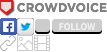
<style>
.page{position:relative;width:107px;height:52px;background:#ffffff}
.page>*{position:absolute;margin:0}
.t1{font:12px "Gotham-Bold";letter-spacing:0.01em;color:#808080;text-transform:uppercase}
</style>
<div class="page">
<p class="t1" style="left:17px;top:2px;width:90px;height:11px">CrowdVoice</p>
</div>
